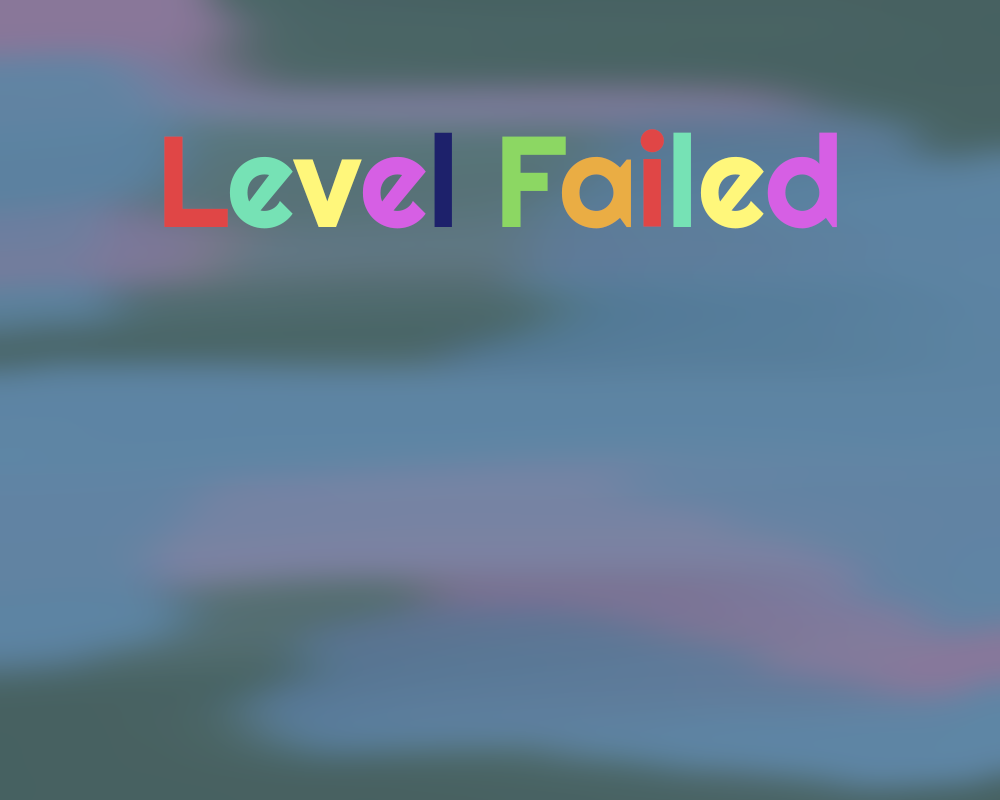
<style>
.page{position:relative;width:1000px;height:800px}
.page>*{position:absolute;margin:0}
.t1{font:128.8px "Righteous-Regular";color:#e04646}
.t2{font:128.8px "Righteous-Regular";color:#76e2b5}
.t3{font:128.8px "Righteous-Regular";color:#fff77b}
.t4{font:128.8px "Righteous-Regular";color:#d65fe4}
.t5{font:128.8px "Righteous-Regular";color:#1d216b}
.t6{font:128.8px "Righteous-Regular";color:#8cd763}
.t7{font:128.8px "Righteous-Regular";color:#eaad44}
</style>
<div class="page">
<p class="t1" style="left:164px;top:129px;width:673px;height:100px">L<span class="t2">e</span><span class="t3">v</span><span class="t4">e</span><span class="t5">l </span><span class="t6">F</span><span class="t7">a</span>i<span class="t2">l</span><span class="t3">e</span><span class="t4">d</span></p>
</div>
